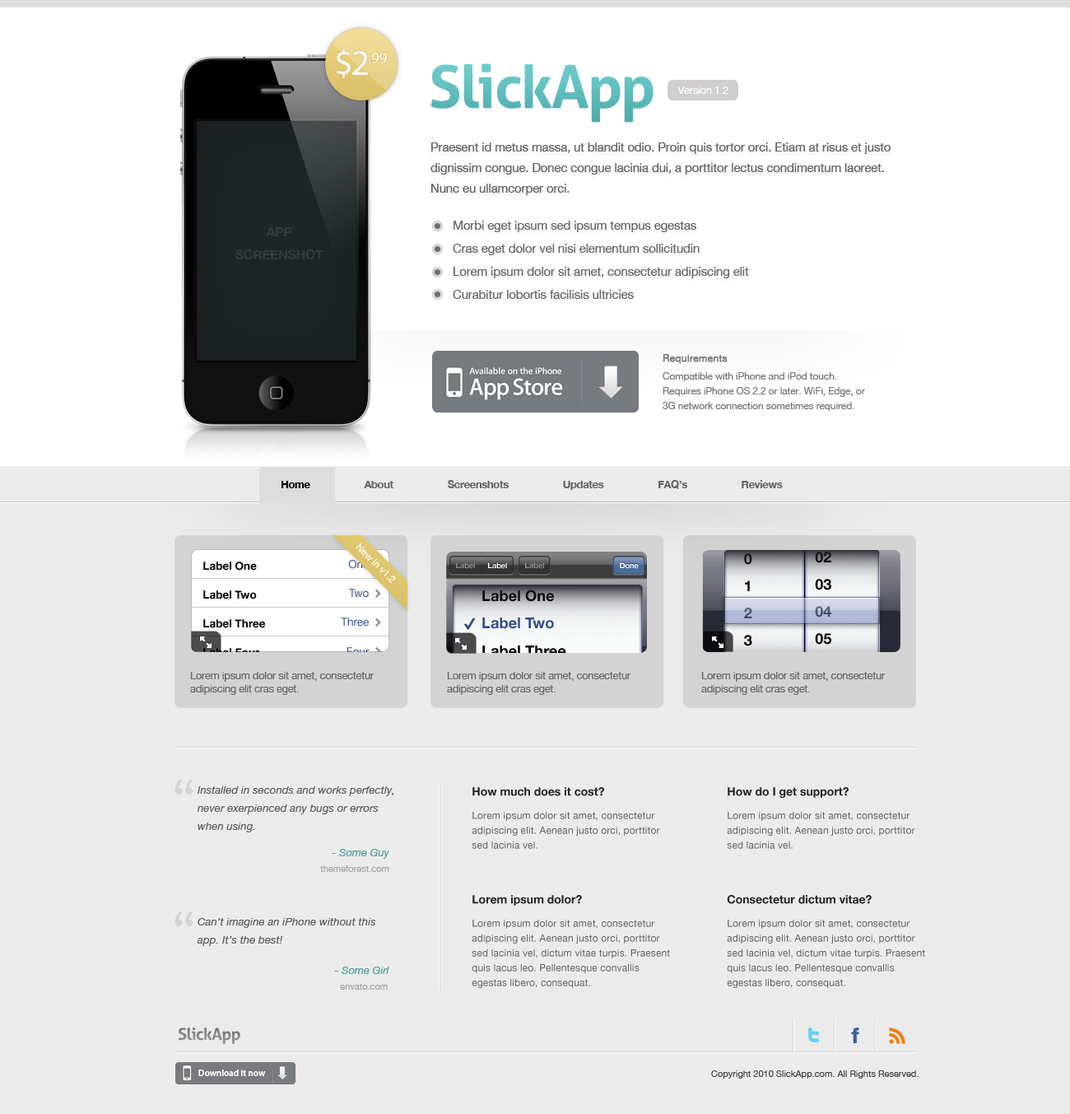
<style>
.page{position:relative;width:1070px;height:1114px;background:#ebebeb}
.page>*{position:absolute;margin:0}
.t1{font:36.7px "MyriadPro-Regular";letter-spacing:-0.05em;color:#ffffff}
.t2{font:15.6px "MyriadPro-Regular";letter-spacing:-0.025em;color:#ffffff}
.t3{font:59.3px "Aller-Bold";letter-spacing:-0.025em;color:#5ac4c5}
.t4{font:10.7px "HelveticaNeue";letter-spacing:-0.025em;color:#ffffff}
.t5{font:12.4px/20.6px "HelveticaNeue";letter-spacing:-0.01em;color:#636363}
.t6{font:12.4px/23.1px "HelveticaNeue";letter-spacing:-0.01em;color:#666666}
.t7{font:13.2px/23.1px "HelveticaNeue-Bold";letter-spacing:-0.025em;color:#353b3c;text-transform:uppercase}
.t8{font:9.9px/14.8px "HelveticaNeue";letter-spacing:-0.01em;color:#757575}
.t9{font:9.9px/18.1px "HelveticaNeue";color:#757575;font-weight:bold}
.t10{font:9.9px/18.1px "HelveticaNeue";letter-spacing:-0.01em;color:#757575}
.t11{font:10.7px "HelveticaNeue-Bold";letter-spacing:-0.025em;color:#636363}
.t12{font:10.7px "HelveticaNeue-Bold";letter-spacing:-0.025em;color:#000000}
.t13{font:10.7px "HelveticaNeue";letter-spacing:-0.025em;color:#696969}
.t14{font:61.8px "junctionregular";color:#d3d3d3}
.t15{font:10.7px/18.1px "HelveticaNeue-Italic";letter-spacing:0.01em;color:#5e5e5e}
.t16{font:11.5px "HelveticaNeue-Bold";color:#252525}
.t17{font:9.9px/14.8px "HelveticaNeue";letter-spacing:0.01em;color:#636363}
.t18{font:10.7px "HelveticaNeue-Italic";color:#519fa0}
.t19{font:9.1px "HelveticaNeue";color:#a4a4a4}
.t20{font:16.5px "Aller-Bold";letter-spacing:-0.025em;color:#898989}
.t21{font:9.1px "MyriadPro-Semibold";color:#ffffff}
.t22{font:9.1px "HelveticaNeue";color:#464646}
</style>
<div class="page">
<p class="t1" style="left:337px;top:48px;width:31px;height:30px">$2</p>
<p class="t2" style="left:369px;top:53px;width:18px;height:10px">.99</p>
<p class="t3" style="left:431px;top:63px;width:223px;height:60px">SlickApp</p>
<p class="t4" style="left:678px;top:86px;width:51px;height:8px">Version 1.2</p>
<p class="t5" style="left:431px;top:142px;width:460px;height:53px">Praesent id metus massa, ut blandit odio. Proin quis tortor orci. Etiam at risus et justo dignissim congue. Donec congue lacinia dui, a porttitor lectus condimentum laoreet. Nunc eu ullamcorper orci.</p>
<p class="t6" style="left:453px;top:221px;width:296px;height:78px">Morbi eget ipsum sed ipsum tempus egestas<br>Cras eget dolor vel nisi elementum sollicitudin<br>Lorem ipsum dolor sit amet, consectetur adipiscing elit<br>Curabitur lobortis facilisis ultricies</p>
<p class="t7" style="left:235px;top:227px;width:89px;height:32px;text-align:center">App<br>Screenshot</p>
<p class="t8" style="left:663px;top:354px;width:202px;height:57px"><span class="t9">Requirements<br></span><span class="t10">Compatible with iPhone and iPod touch.<br></span>Requires iPhone OS 2.2 or later. WiFi, Edge, or 3G network connection sometimes required.</p>
<p class="t11" style="left:282px;top:480px;width:501px;height:10px"><span class="t12">Home                    </span>About                    Screenshots                    Updates                    FAQ’s                    Reviews</p>
<p class="t13" style="left:190px;top:672px;width:185px;height:23px">Lorem ipsum dolor sit amet, consectetur adipiscing elit cras eget.</p>
<p class="t13" style="left:447px;top:672px;width:185px;height:23px">Lorem ipsum dolor sit amet, consectetur adipiscing elit cras eget.</p>
<p class="t13" style="left:702px;top:672px;width:184px;height:23px">Lorem ipsum dolor sit amet, consectetur adipiscing elit cras eget.</p>
<p class="t14" style="left:175px;top:779px;width:18px;height:16px">“</p>
<p class="t15" style="left:197px;top:786px;width:197px;height:46px">Installed in seconds and works perfectly, never exerpienced any bugs or errors when using.</p>
<p class="t16" style="left:473px;top:787px;width:131px;height:9px">How much does it cost?</p>
<p class="t16" style="left:728px;top:787px;width:121px;height:11px">How do I get support?</p>
<p class="t17" style="left:472px;top:812px;width:188px;height:37px">Lorem ipsum dolor sit amet, consectetur adipiscing elit. Aenean justo orci, porttitor sed lacinia vel.</p>
<p class="t17" style="left:727px;top:812px;width:189px;height:37px">Lorem ipsum dolor sit amet, consectetur adipiscing elit. Aenean justo orci, porttitor sed lacinia vel.</p>
<p class="t18" style="left:332px;top:849px;width:58px;height:10px">- Some Guy</p>
<p class="t19" style="left:320px;top:865px;width:69px;height:7px">themeforest.com</p>
<p class="t16" style="left:473px;top:895px;width:109px;height:11px">Lorem ipsum dolor?</p>
<p class="t16" style="left:727px;top:895px;width:145px;height:9px">Consectetur dictum vitae?</p>
<p class="t14" style="left:175px;top:911px;width:18px;height:15px">“</p>
<p class="t15" style="left:197px;top:918px;width:179px;height:28px">Can’t imagine an iPhone without this app. It’s the best!</p>
<p class="t17" style="left:472px;top:920px;width:198px;height:68px">Lorem ipsum dolor sit amet, consectetur adipiscing elit. Aenean justo orci, porttitor sed lacinia vel, dictum vitae turpis. Praesent quis lacus leo. Pellentesque convallis egestas libero, consequat.</p>
<p class="t17" style="left:727px;top:920px;width:198px;height:68px">Lorem ipsum dolor sit amet, consectetur adipiscing elit. Aenean justo orci, porttitor sed lacinia vel, dictum vitae turpis. Praesent quis lacus leo. Pellentesque convallis egestas libero, consequat.</p>
<p class="t18" style="left:334px;top:967px;width:55px;height:7px">- Some Girl</p>
<p class="t19" style="left:340px;top:984px;width:48px;height:6px">envato.com</p>
<p class="t20" style="left:178px;top:1028px;width:62px;height:16px">SlickApp</p>
<p class="t21" style="left:198px;top:1070px;width:68px;height:6px">Download it now</p>
<p class="t22" style="left:711px;top:1070px;width:208px;height:9px">Copyright 2010 SlickApp.com. All Rights Reserved.</p>
</div>
